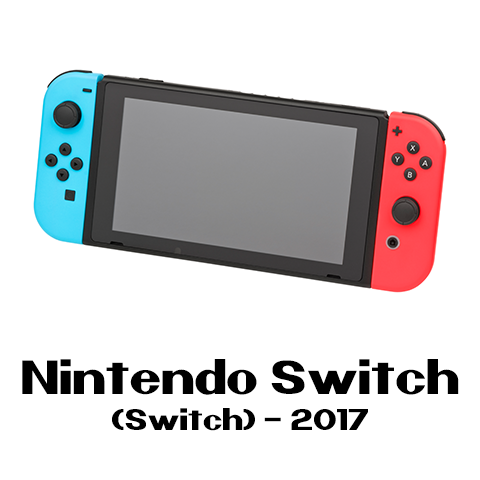
<style>
.page{position:relative;width:480px;height:480px;background:#ffffff}
.page>*{position:absolute;margin:0}
.t1{font:48px "Nintender";color:#000000}
.t2{font:30px "Nintender";color:#000000}
</style>
<div class="page">
<p class="t1" style="left:22px;top:359px;width:437px;height:72px;text-align:center">Nintendo Switch<br><span class="t2">(Switch) - 2017</span></p>
</div>
